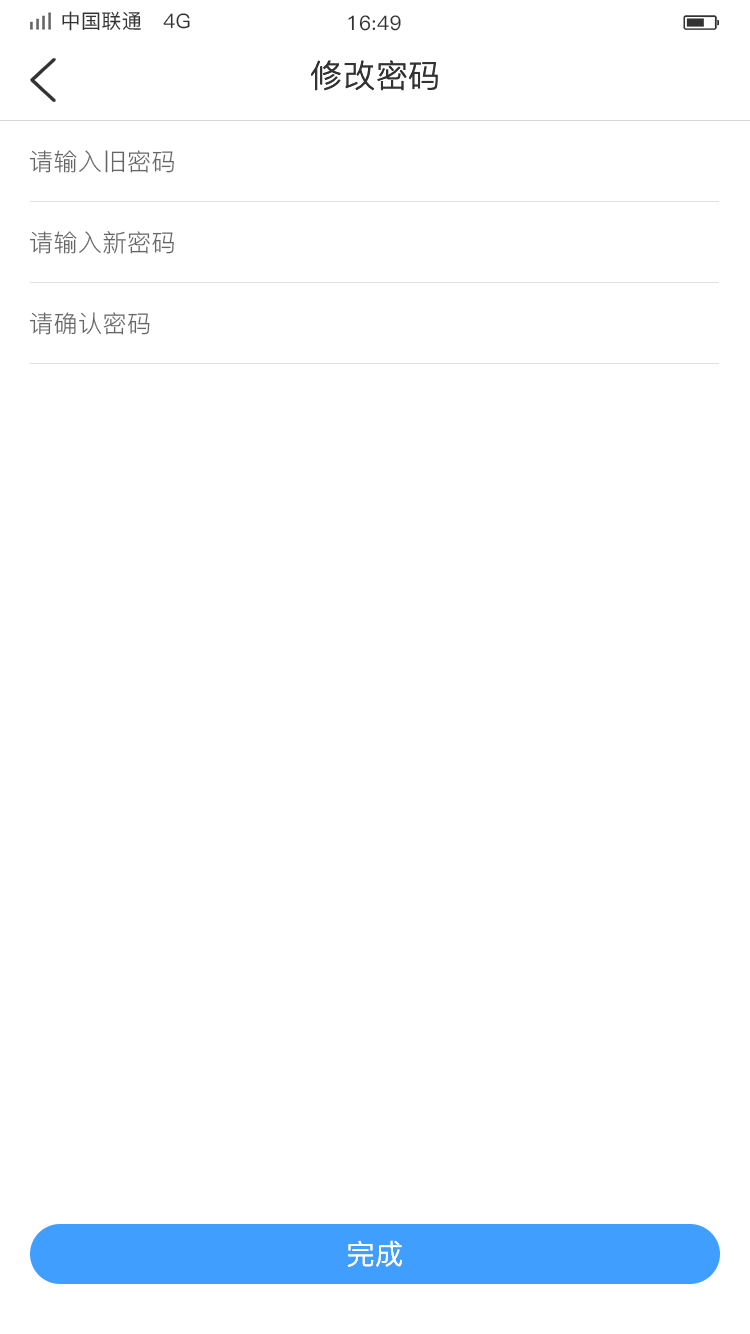
<style>
.page{position:relative;width:750px;height:1334px;background:#ffffff}
.page>*{position:absolute;margin:0}
.t1{font:20px "PingFang-SC-Medium";letter-spacing:0.02em;color:#333333}
.t2{font:32px "PingFang-SC-Regular";letter-spacing:0.02em;color:#333333}
.t3{font:24px "PingFang-SC-Regular";letter-spacing:0.02em;color:#666666}
.t4{font:28px "PingFang-SC-Regular";letter-spacing:0.02em;color:#ffffff}
</style>
<div class="page">
<p class="t1" style="left:62px;top:11px;width:128px;height:20px">中国联通   4G</p>
<p class="t1" style="left:348px;top:15px;width:53px;height:16px">16:49</p>
<p class="t2" style="left:311px;top:60px;width:127px;height:31px">修改密码</p>
<p class="t3" style="left:29px;top:150px;width:145px;height:23px">请输入旧密码</p>
<p class="t3" style="left:29px;top:231px;width:145px;height:23px">请输入新密码</p>
<p class="t3" style="left:29px;top:312px;width:121px;height:23px">请确认密码</p>
<p class="t4" style="left:347px;top:1240px;width:55px;height:27px">完成</p>
</div>
